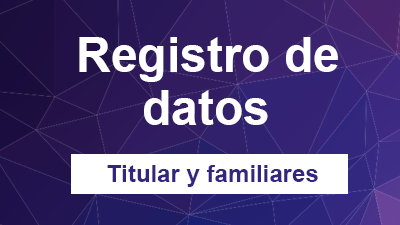
<style>
.page{position:relative;width:400px;height:225px}
.page>*{position:absolute;margin:0}
.t1{font:48px "Arial-BoldMT";color:#ffffff}
.t2{font:24px "Arial-BoldMT";color:#32267e}
</style>
<div class="page">
<p class="t1" style="left:79px;top:37px;width:259px;height:45px">Registro de</p>
<p class="t1" style="left:144px;top:90px;width:124px;height:35px">datos</p>
<p class="t2" style="left:107px;top:165px;width:211px;height:22px">Titular y familiares</p>
</div>
